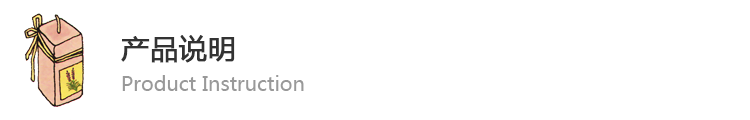
<style>
.page{position:relative;width:750px;height:120px;background:#ffffff}
.page>*{position:absolute;margin:0}
.t1{font:28px "MicrosoftYaHei";color:#333333;font-weight:bold}
.t2{font:20px "MicrosoftYaHei";color:#999999}
</style>
<div class="page">
<p class="t1" style="left:121px;top:35px;width:114px;height:28px">产品说明</p>
<p class="t2" style="left:122px;top:75px;width:182px;height:16px">Product Instruction</p>
</div>
